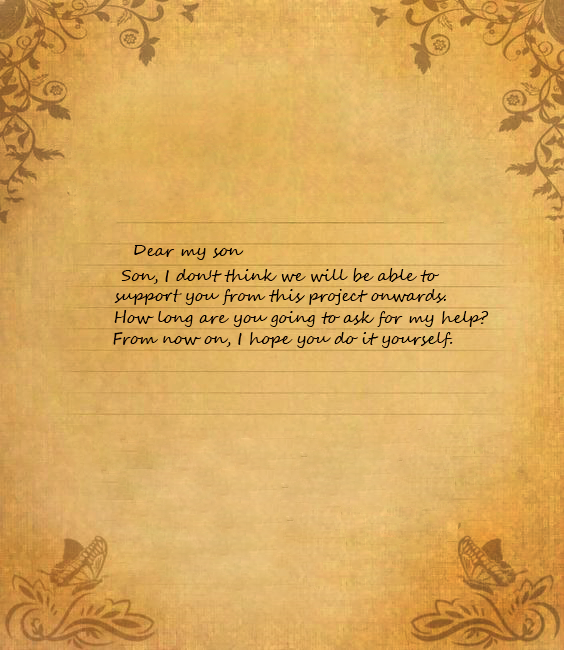
<style>
.page{position:relative;width:564px;height:650px}
.page>*{position:absolute;margin:0}
.t1{font:16px "SegoeScript";color:#000000}
</style>
<div class="page">
<p class="t1" style="left:134px;top:245px;width:110px;height:15px">Dear my son</p>
<p class="t1" style="left:121px;top:268px;width:319px;height:16px">Son, I don't think we will be able to</p>
<p class="t1" style="left:114px;top:289px;width:332px;height:16px">support you from this project onwards.</p>
<p class="t1" style="left:114px;top:310px;width:375px;height:17px">How long are you going to ask for my help?</p>
<p class="t1" style="left:113px;top:332px;width:340px;height:16px">From now on, I hope you do it yourself.</p>
</div>
